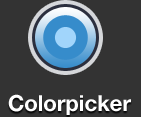
<style>
.page{position:relative;width:141px;height:117px;background:#333333}
.page>*{position:absolute;margin:0}
.t1{font:22px "HelveticaNeue-Bold";color:#ffffff}
</style>
<div class="page">
<p class="t1" style="left:8px;top:94px;width:123px;height:21px">Colorpicker</p>
</div>
